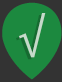
<style>
.page{position:relative;width:62px;height:82px;background:#1c893f}
.page>*{position:absolute;margin:0}
.t1{font:48px "MyriadPro-Regular";color:#c5daca}
</style>
<div class="page">
<p class="t1" style="left:19px;top:13px;width:27px;height:45px">√</p>
</div>
